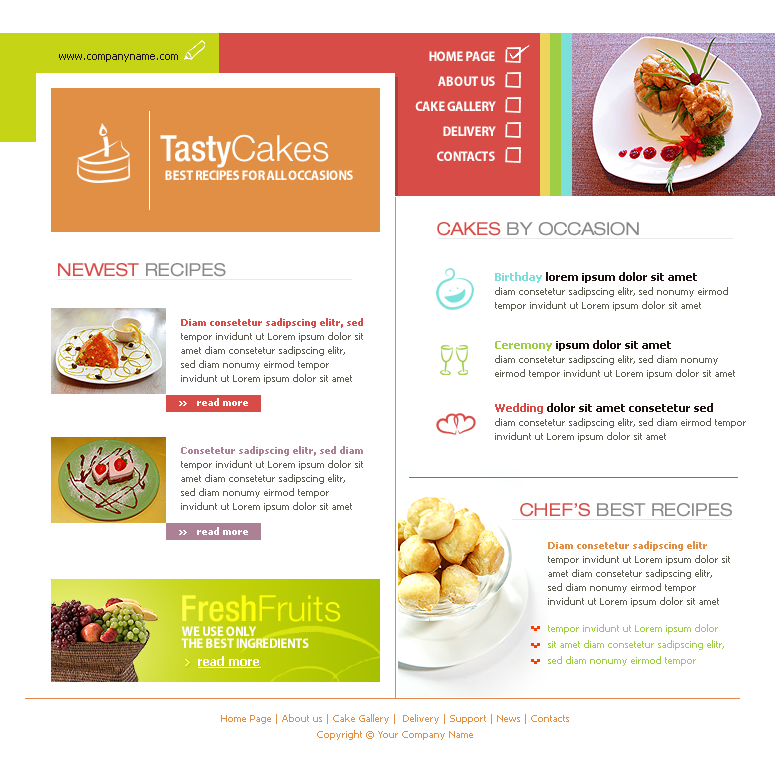
<style>
.page{position:relative;width:775px;height:760px;background:#ffffff}
.page>*{position:absolute;margin:0}
.t1{font:11px "Tahoma";color:#1e1210}
.t2{font:14px "MyriadPro-BoldSemiCn";letter-spacing:-0.025em;color:#ffffff;text-transform:uppercase}
.t3{font:36px "HelveticaNeueLTPro-MdCn";color:#ffffff}
.t4{font:36px "HelveticaNeueLTPro-Lt";color:#ffffff}
.t5{font:18px "HelveticaNeueLTPro-Ex";letter-spacing:-0.025em;color:#898989;text-transform:uppercase}
.t6{font:18px "HelveticaNeueLTPro-Ex";letter-spacing:-0.025em;color:#d74c47;text-transform:uppercase}
.t7{font:10px/14px "Tahoma";color:#5c5c50}
.t8{font:11px/14px "Tahoma-Bold";color:#7be0da}
.t9{font:11px/14px "Tahoma-Bold";color:#1e1210}
.t10{font:10px/14px "Tahoma-Bold";color:#d74c47}
.t11{font:11px/14px "Tahoma-Bold";color:#9fce44}
.t12{font:10px "Tahoma-Bold";color:#ffffff}
.t13{font:11px/14px "Tahoma-Bold";color:#d74c47}
.t14{font:10px/14px "Tahoma-Bold";color:#ac8095}
.t15{font:10px/14px "Tahoma-Bold";color:#e18f45}
.t16{font:36px "HelveticaNeueLTPro-Lt";color:#ffff14}
.t17{font:36px "HelveticaNeueLTPro-MdCn";color:#ffff14}
.t18{font:14px/12.2px "MyriadPro-BoldSemiCn";letter-spacing:-0.025em;color:#ffffff;text-transform:uppercase}
.t19{font:10px/16px "Tahoma";color:#9fce44}
.t20{font:12px "Tahoma-Bold";color:#ffffff;text-decoration:underline}
.t21{font:10px/16.3px "Tahoma";color:#e18f45}
</style>
<div class="page">
<p class="t1" style="left:59px;top:54px;width:119px;height:8px">www.companyname.com</p>
<p class="t2" style="left:429px;top:51px;width:66px;height:10px">HOME PAGE</p>
<p class="t2" style="left:438px;top:76px;width:57px;height:10px">ABOUT US</p>
<p class="t2" style="left:415px;top:101px;width:81px;height:10px">CAKE GALLERY</p>
<p class="t2" style="left:443px;top:126px;width:53px;height:10px">DELIVERY</p>
<p class="t3" style="left:160px;top:134px;width:169px;height:34px">Tasty<span class="t4">Cakes</span></p>
<p class="t2" style="left:437px;top:151px;width:58px;height:10px">CONTACTS</p>
<p class="t2" style="left:165px;top:170px;width:188px;height:10px">BEST RECIPES FOR ALL OCCASIONS</p>
<p class="t5" style="left:437px;top:222px;width:202px;height:14px"><span class="t6">CAKES </span>BY OCCASION</p>
<p class="t5" style="left:58px;top:263px;width:168px;height:14px"><span class="t6">NEWEST </span>RECIPES</p>
<p class="t7" style="left:495px;top:272px;width:233px;height:39px"><span class="t8">Birthday </span><span class="t9">lorem ipsum dolor sit amet <br></span>diam consetetur sadipscing elitr, sed nonumy eirmod tempor invidunt ut Lorem ipsum dolor sit amet</p>
<p class="t7" style="left:181px;top:318px;width:182px;height:66px"><span class="t10">Diam consetetur sadipscing elitr, sed <br></span>tempor invidunt ut Lorem ipsum dolor sit amet diam consetetur sadipscing elitr, <br>sed diam nonumy eirmod tempor invidunt ut Lorem ipsum dolor sit amet</p>
<p class="t7" style="left:495px;top:340px;width:240px;height:39px"><span class="t11">Ceremony </span><span class="t9">ipsum dolor sit amet <br></span>diam consetetur sadipscing elitr, sed diam nonumy <br>eirmod tempor invidunt ut Lorem ipsum dolor sit amet</p>
<p class="t12" style="left:197px;top:398px;width:51px;height:8px">read more</p>
<p class="t7" style="left:495px;top:403px;width:251px;height:39px"><span class="t13">Wedding </span><span class="t9">dolor sit amet consetetur sed<br></span>diam consetetur sadipscing elitr, sed diam eirmod tempor invidunt ut Lorem ipsum dolor sit amet</p>
<p class="t7" style="left:181px;top:446px;width:182px;height:66px"><span class="t14">Consetetur sadipscing elitr, sed diam<br></span>tempor invidunt ut Lorem ipsum dolor sit amet diam consetetur sadipscing elitr, <br>sed diam nonumy eirmod tempor invidunt ut Lorem ipsum dolor sit amet</p>
<p class="t5" style="left:520px;top:503px;width:212px;height:14px"><span class="t6">CHEF’S </span>BEST RECIPES</p>
<p class="t12" style="left:197px;top:527px;width:51px;height:8px">read more</p>
<p class="t7" style="left:548px;top:541px;width:182px;height:66px"><span class="t15">Diam consetetur sadipscing elitr<br></span>tempor invidunt ut Lorem ipsum dolor sit amet diam consetetur sadipscing elitr, <br>sed diam nonumy eirmod tempor invidunt ut Lorem ipsum dolor sit amet</p>
<p class="t16" style="left:182px;top:595px;width:159px;height:27px"><span class="t17">Fresh</span>Fruits</p>
<p class="t18" style="left:181px;top:626px;width:128px;height:22px">WE USE ONLY <br>THE BEST INGREDIENTS</p>
<p class="t19" style="left:548px;top:624px;width:176px;height:42px">tempor invidunt ut Lorem ipsum dolor sit amet diam consetetur sadipscing elitr, <br>sed diam nonumy eirmod tempor</p>
<p class="t20" style="left:198px;top:656px;width:63px;height:12px">read more</p>
<p class="t21" style="left:221px;top:714px;width:348px;height:26px;text-align:center">Home Page | About us | Cake Gallery |  Delivery | Support | News | Contacts<br>Copyright © Your Company Name</p>
</div>
